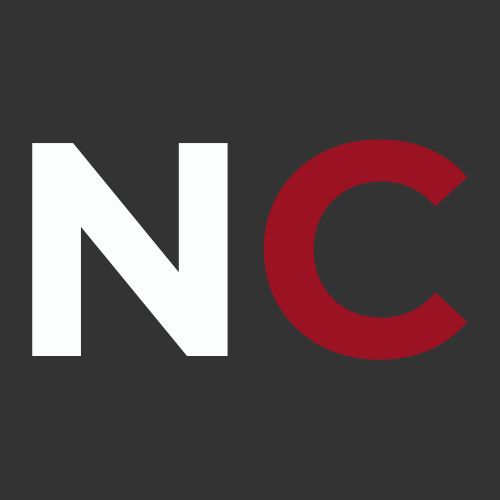
<style>
.page{position:relative;width:500px;height:500px;background:#333333}
.page>*{position:absolute;margin:0}
.t1{font:304.2px "Montserrat-Bold";letter-spacing:-0.001em;color:#fcfefd}
.t2{font:304.2px "Montserrat-Bold";letter-spacing:-0.001em;color:#9b1222}
</style>
<div class="page">
<p class="t1" style="left:32px;top:139px;width:436px;height:221px">N<span class="t2">C</span></p>
</div>
